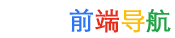
<style>
.page{position:relative;width:175px;height:38px;background:#ffffff}
.page>*{position:absolute;margin:0}
.t1{font:25px "STXihei";color:#2a76f3;font-weight:bold}
.t2{font:25px "STXihei";color:#e72b1b;font-weight:bold}
.t3{font:25px "STXihei";color:#fbbe0c;font-weight:bold}
.t4{font:25px "STXihei";color:#23a145;font-weight:bold}
</style>
<div class="page">
<p class="t1" style="left:69px;top:8px;width:102px;height:25px">前<span class="t2">端</span><span class="t3">导</span><span class="t4">航</span></p>
</div>
